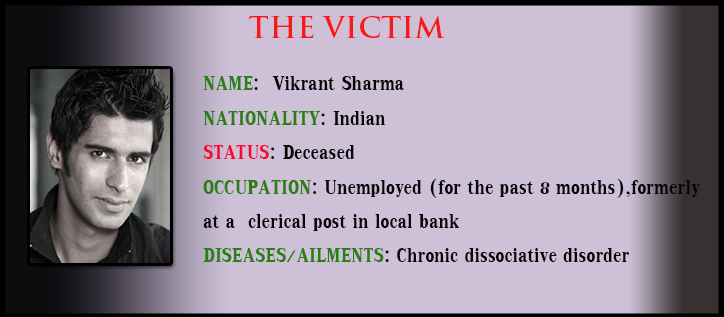
<style>
.page{position:relative;width:724px;height:317px;background:#cdc0d7}
.page>*{position:absolute;margin:0}
.t1{font:28.7px "TrajanPro-Bold";letter-spacing:0.005em;color:#f71919}
.t2{font:28.7px "KodchiangUPCBold";letter-spacing:0.005em;color:#060606}
.t3{font:28.7px "KodchiangUPCBold";letter-spacing:0.005em;color:#297f12}
.t4{font:28.7px "KodchiangUPCBold";letter-spacing:0.005em;color:#f80734}
</style>
<div class="page">
<p class="t1" style="left:249px;top:16px;width:196px;height:22px">THE VICTIM</p>
<p class="t2" style="left:203px;top:76px;width:497px;height:186px"><span class="t3">NAME</span>:  Vikrant Sharma<br><span class="t3">NATIONALITY</span>: Indian<br><span class="t4">STATUS</span>: Deceased<br><span class="t3">OCCUPATION</span>: Unemployed (for the past 8 months),formerly at a  clerical post in local bank<br><span class="t3">DISEASES/AILMENTS</span>: Chronic dissociative disorder</p>
</div>
